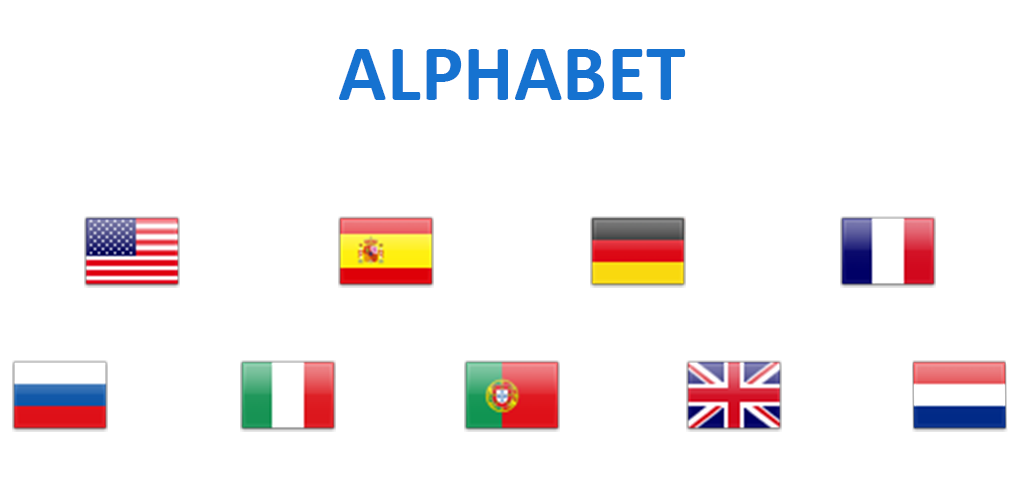
<style>
.page{position:relative;width:1024px;height:500px;background:#ffffff}
.page>*{position:absolute;margin:0}
.t1{font:80px "Calibri-Bold";color:#1672d0}
</style>
<div class="page">
<p class="t1" style="left:339px;top:49px;width:347px;height:51px">ALPHABET</p>
</div>
